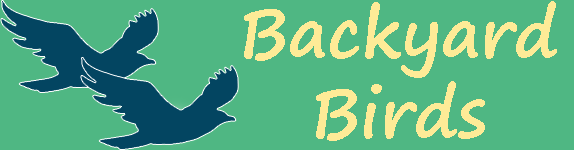
<style>
.page{position:relative;width:574px;height:150px;background:#4fb783}
.page>*{position:absolute;margin:0}
.t1{font:67.3px "SegoePrint-Bold";color:#feeb97}
</style>
<div class="page">
<p class="t1" style="left:244px;top:1px;width:313px;height:140px;text-align:center">Backyard<br>Birds</p>
</div>
